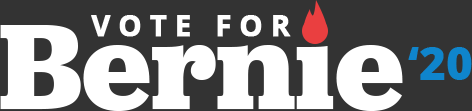
<style>
.page{position:relative;width:472px;height:111px;background:#333333}
.page>*{position:absolute;margin:0}
.t1{font:28.9px "OpenSans-Bold";letter-spacing:0.26em;color:#ffffff;font-weight:bold}
.t2{font:126.7px "Jubilat-Bold";color:#ffffff}
.t3{font:45.7px "OpenSans-ExtraBold";color:#0f85cc}
</style>
<div class="page">
<p class="t1" style="left:91px;top:15px;width:200px;height:22px">VOTE FOR</p>
<p class="t2" style="left:0px;top:20px;width:403px;height:91px">Bernie</p>
<p class="t3" style="left:408px;top:47px;width:64px;height:33px">‘20</p>
</div>
